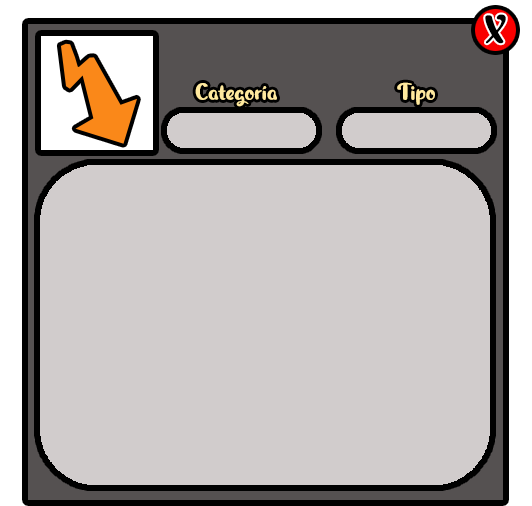
<style>
.page{position:relative;width:532px;height:506px;background:#d1cccc}
.page>*{position:absolute;margin:0}
.t1{font:40px "MagicOwl-PersonalUse";color:#000000}
.t2{font:24px "MagicOwl-PersonalUse";color:#ffe99e}
</style>
<div class="page">
<p class="t1" style="left:485px;top:14px;width:21px;height:30px">X</p>
<p class="t2" style="left:195px;top:83px;width:82px;height:24px">Categoría</p>
<p class="t2" style="left:397px;top:82px;width:38px;height:23px">Tipo</p>
</div>
